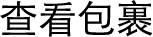
<style>
.page{position:relative;width:153px;height:37px;background:#ffffff}
.page>*{position:absolute;margin:0}
.t1{font:38.9px "STHeitiTC-Light";color:#000000}
</style>
<div class="page">
<p class="t1" style="left:0px;top:0px;width:153px;height:37px">查看包裹</p>
</div>
